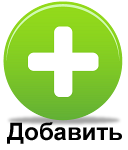
<style>
.page{position:relative;width:128px;height:150px;background:#ffffff}
.page>*{position:absolute;margin:0}
.t1{font:24px "Arial-BoldMT";color:#000000}
</style>
<div class="page">
<p class="t1" style="left:7px;top:122px;width:115px;height:22px">Добавить</p>
</div>
